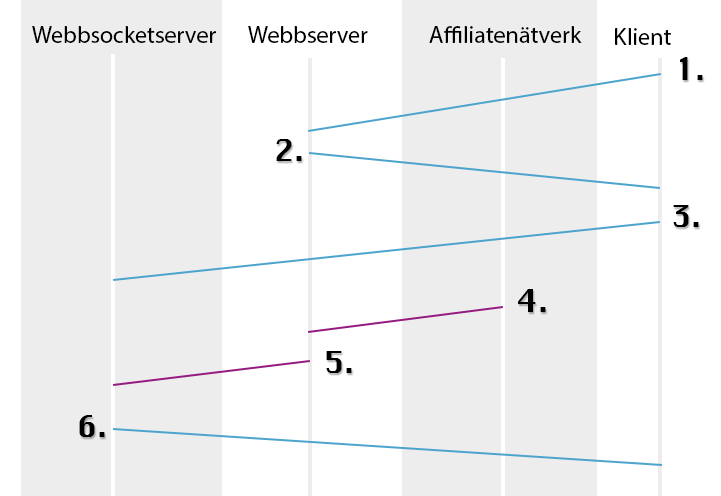
<style>
.page{position:relative;width:721px;height:496px;background:#ededed}
.page>*{position:absolute;margin:0}
.t1{font:24px "MyriadPro-Regular";color:#000000}
.t2{font:30px "Silom";color:#000000}
</style>
<div class="page">
<p class="t1" style="left:32px;top:26px;width:184px;height:17px">Webbsocketserver</p>
<p class="t1" style="left:248px;top:26px;width:120px;height:17px">Webbserver</p>
<p class="t1" style="left:429px;top:26px;width:153px;height:17px">Affiliatenätverk</p>
<p class="t1" style="left:615px;top:28px;width:56px;height:17px">Klient</p>
<p class="t2" style="left:680px;top:57px;width:23px;height:23px">1.</p>
<p class="t2" style="left:276px;top:139px;width:26px;height:22px">2.</p>
<p class="t2" style="left:673px;top:205px;width:26px;height:22px">3.</p>
<p class="t2" style="left:518px;top:289px;width:28px;height:23px">4.</p>
<p class="t2" style="left:326px;top:351px;width:26px;height:22px">5.</p>
<p class="t2" style="left:79px;top:415px;width:26px;height:22px">6.</p>
</div>
